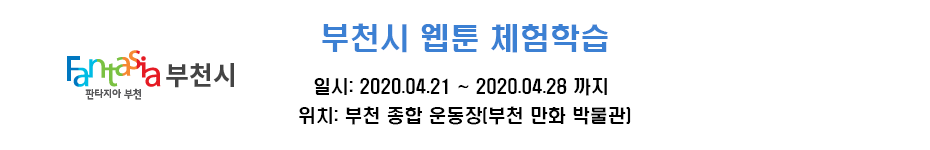
<style>
.page{position:relative;width:930px;height:150px;background:#ffffff}
.page>*{position:absolute;margin:0}
.t1{font:30px "H2hdrM";color:#3c80d3}
.t2{font:18px "H2hdrM";color:#000000}
</style>
<div class="page">
<p class="t1" style="left:322px;top:23px;width:286px;height:30px">부천시 웹툰 체험학습</p>
<p class="t2" style="left:314px;top:78px;width:293px;height:18px">일시: 2020.04.21 ~ 2020.04.28 까지</p>
<p class="t2" style="left:299px;top:106px;width:332px;height:19px">위치: 부천 종합 운동장(부천 만화 박물관)</p>
</div>
